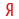
<style>
.page{position:relative;width:19px;height:19px;background:#ffffff}
.page>*{position:absolute;margin:0}
.t1{font:18px "PTSans-Narrow";color:#e21818}
</style>
<div class="page">
<p class="t1" style="left:5px;top:3px;width:8px;height:13px">Я</p>
</div>
